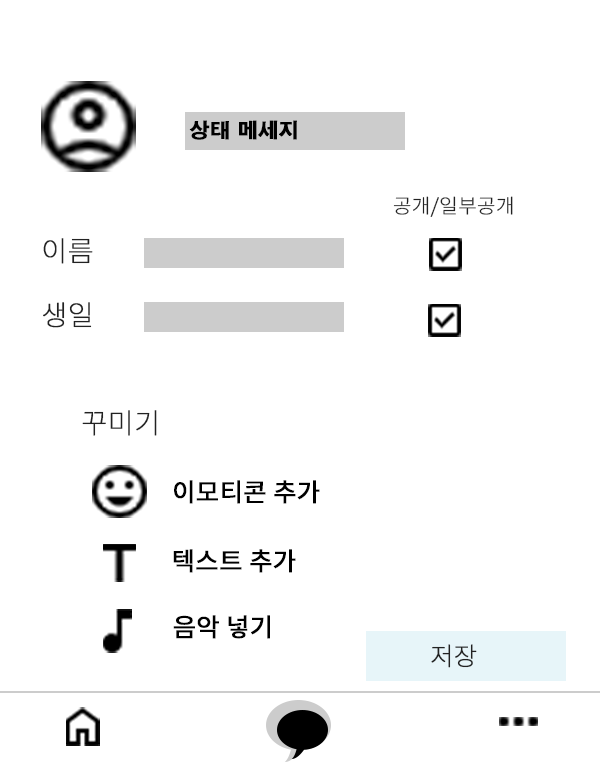
<style>
.page{position:relative;width:600px;height:768px;background:#ffffff}
.page>*{position:absolute;margin:0}
.t1{font:20px "H2gtrE";color:#000000;font-weight:bold}
.t2{font:20px "NotoSansKR-Thin";color:#222222;font-weight:bold}
.t3{font:28px "NotoSansKR-Thin";color:#222222;font-weight:bold}
.t4{font:25px "NotoSansKR-Regular";color:#000000;font-weight:bold}
.t5{font:25px "NotoSansKR-Thin";color:#222222;font-weight:bold}
</style>
<div class="page">
<p class="t1" style="left:189px;top:120px;width:108px;height:20px">상태 메세지</p>
<p class="t2" style="left:393px;top:196px;width:120px;height:21px">공개/일부공개</p>
<p class="t3" style="left:43px;top:238px;width:50px;height:26px">이름</p>
<p class="t3" style="left:43px;top:302px;width:49px;height:26px">생일</p>
<p class="t3" style="left:82px;top:410px;width:75px;height:26px">꾸미기</p>
<p class="t4" style="left:174px;top:480px;width:146px;height:24px">이모티콘 추가</p>
<p class="t4" style="left:173px;top:549px;width:123px;height:24px">텍스트 추가</p>
<p class="t4" style="left:173px;top:615px;width:97px;height:24px">음악 넣기</p>
<p class="t5" style="left:431px;top:644px;width:46px;height:24px">저장</p>
</div>
